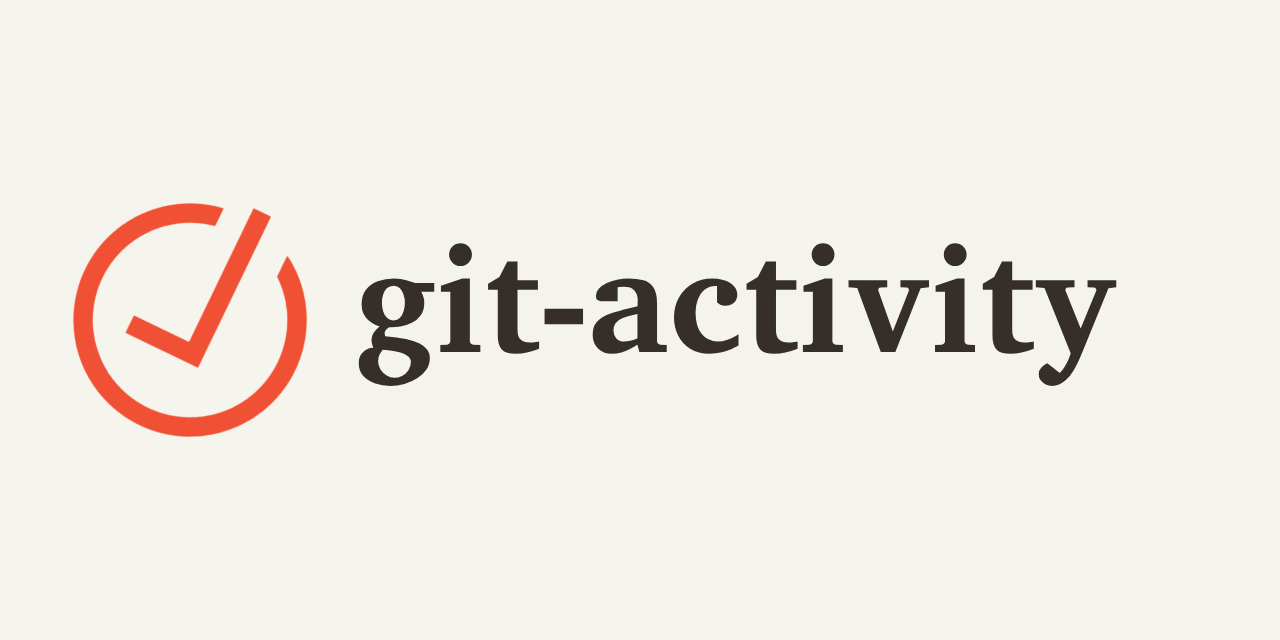
<style>
.page{position:relative;width:1280px;height:640px;background:#f5f3ed}
.page>*{position:absolute;margin:0}
.t1{font:147px "Georgia-Bold";color:#362f29}
</style>
<div class="page">
<p class="t1" style="left:358px;top:243px;width:759px;height:143px">git-activity</p>
</div>
